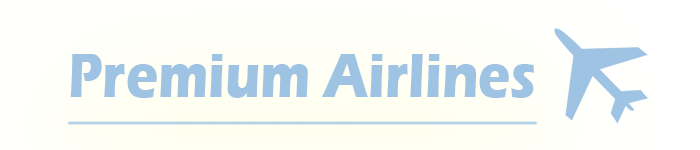
<style>
.page{position:relative;width:700px;height:150px}
.page>*{position:absolute;margin:0}
.t1{font:63.7px "ErasITC-Bold";color:#9fc3e3;scale:0.85 1}
</style>
<div class="page">
<p class="t1" style="left:70px;top:54px;width:464px;height:44px">Premium Airlines</p>
</div>
